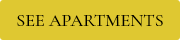
<style>
.page{position:relative;width:180px;height:40px;background:#dfc831}
.page>*{position:absolute;margin:0}
.t1{font:18px "CormorantGaramond-Medium";color:#000000}
</style>
<div class="page">
<p class="t1" style="left:17px;top:14px;width:146px;height:13px">SEE APARTMENTS</p>
</div>
